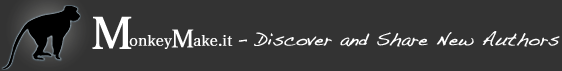
<style>
.page{position:relative;width:562px;height:71px;background:#333333}
.page>*{position:absolute;margin:0}
.t1{font:43.8px "HiraMinPro-W3";color:#ffffff;font-weight:bold}
.t2{font:24.5px "HiraMinPro-W3";color:#ffffff;font-weight:bold}
.t3{font:14.6px "HiraMinPro-W3";color:#ffffff;font-weight:bold}
.t4{font:17.7px "Handwriting-Dakota";color:#ffffff;font-weight:bold}
</style>
<div class="page">
<p class="t1" style="left:92px;top:16px;width:40px;height:33px">M</p>
<p class="t2" style="left:171px;top:29px;width:23px;height:19px">M</p>
<p class="t3" style="left:129px;top:35px;width:43px;height:14px">onkey</p>
<p class="t3" style="left:193px;top:35px;width:40px;height:11px">ake.it</p>
<p class="t4" style="left:238px;top:31px;width:322px;height:16px">- Discover and Share New Authors</p>
</div>
